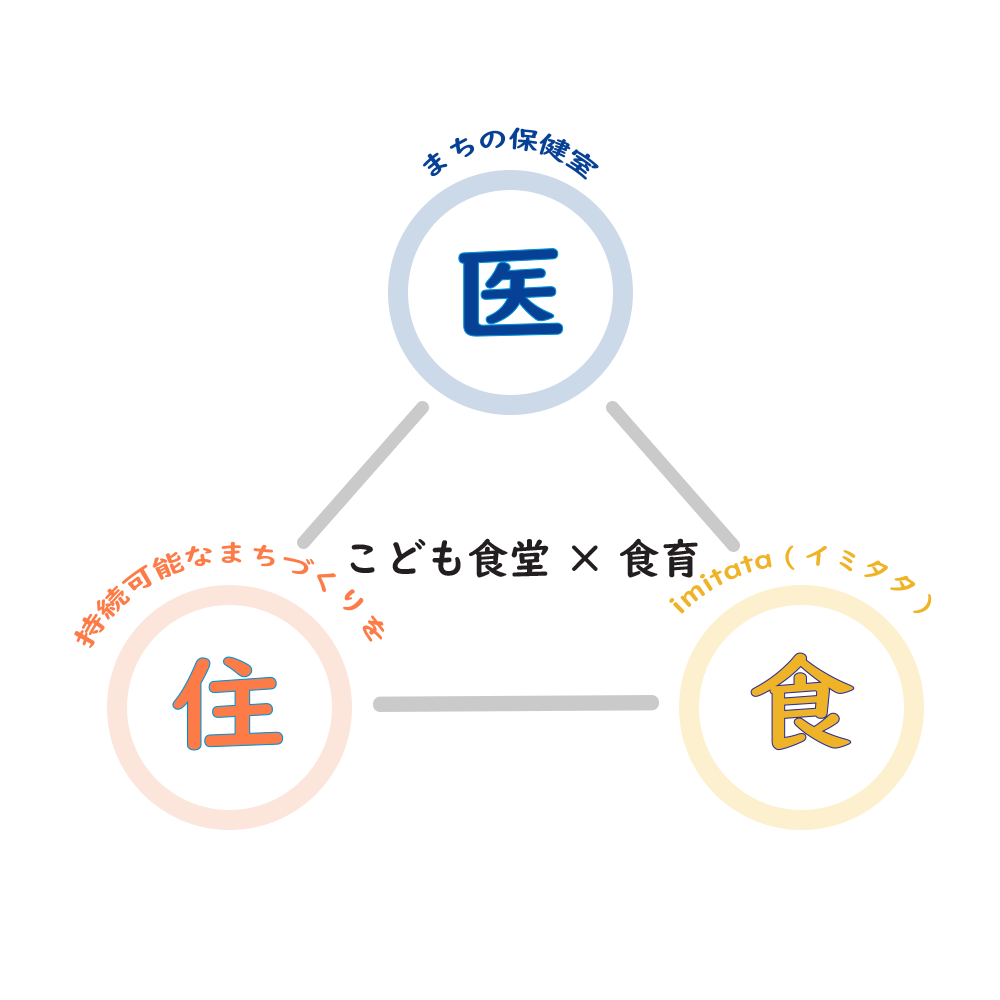
<style>
.page{position:relative;width:1000px;height:1000px;background:#ffffff}
.page>*{position:absolute;margin:0}
.t1{font:25px "UDDigiKyokashoNP-B";color:#074195}
.t2{font:104.2px "UDDigiKyokashoNP-B";color:#074195;scale:1.17 1}
.t3{font:25px "UDDigiKyokashoNP-B";color:#fc7b47}
.t4{font:41.7px "UDDigiKyokashoNP-B";color:#231f20}
.t5{font:25px "UDDigiKyokashoNP-B";color:#efb327}
.t6{font:104.2px "UDDigiKyokashoNP-B";color:#efb327;scale:1.06 1}
.t7{font:104.2px "UDDigiKyokashoNP-B";color:#fc7b47;scale:1.14 1}
</style>
<div class="page">
<p class="t1" style="left:423px;top:127px;width:176px;height:53px">まちの保健室</p>
<p class="t2" style="left:458px;top:248px;width:106px;height:89px">医</p>
<p class="t3" style="left:74px;top:541px;width:311px;height:108px">持続可能なまちづくりを</p>
<p class="t4" style="left:350px;top:538px;width:348px;height:40px">こども食堂 × 食育</p>
<p class="t5" style="left:669px;top:545px;width:263px;height:69px">imitata (イミタタ)</p>
<p class="t6" style="left:750px;top:652px;width:105px;height:99px">食</p>
<p class="t7" style="left:172px;top:656px;width:112px;height:95px">住</p>
</div>
